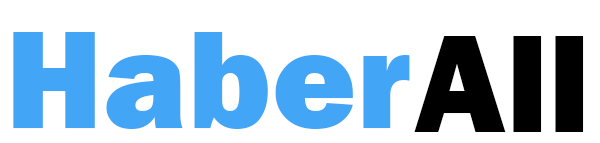
<style>
.page{position:relative;width:600px;height:143px;background:#ffffff}
.page>*{position:absolute;margin:0}
.t1{font:143.7px "FranklinGothic-Heavy";color:#42a5f5}
.t2{font:143.7px "FranklinGothic-Heavy";color:#000000}
</style>
<div class="page">
<p class="t1" style="left:13px;top:32px;width:397px;height:97px">Haber</p>
<p class="t2" style="left:414px;top:36px;width:170px;height:96px">All</p>
</div>
